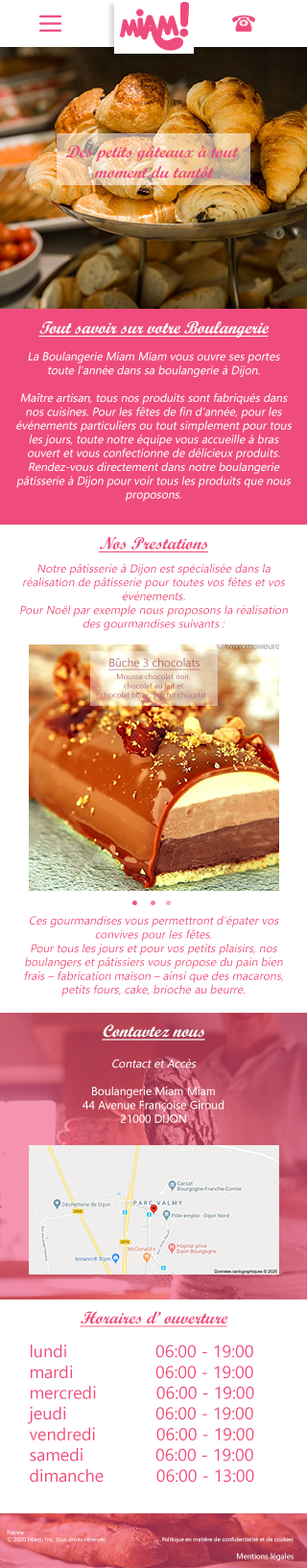
<style>
.page{position:relative;width:307px;height:1568px;background:#ffffff}
.page>*{position:absolute;margin:0}
.t1{font:17.3px "ScriptMTBold";color:#ef4c7d;font-style:italic}
.t2{font:17.3px "ScriptMTBold";color:#ffffff;font-style:italic;text-decoration:underline}
.t3{font:11.5px "SegoeUI";color:#ffffff;font-style:italic}
.t4{font:17.3px "ScriptMTBold";color:#ef4c7d;font-style:italic;text-decoration:underline}
.t5{font:11.5px "SegoeUI";color:#ef4c7d;font-style:italic}
.t6{font:11.5px "SegoeUI";color:#b46a7f;text-decoration:underline}
.t7{font:7.7px "SegoeUI";color:#b46a7f}
.t8{font:11.5px "SegoeUI";color:#ffffff}
.t9{font:17.3px "SegoeUI";color:#ef4c7d}
.t10{font:5.8px "SegoeUI";color:#ffffff}
.t11{font:5.8px "SegoeUI"}
.t12{font:7.7px "SegoeUI";color:#ffffff}
</style>
<div class="page">
<p class="t1" style="left:66px;top:145px;width:173px;height:33px;text-align:center">Des petits gâteaux à tout <br>moment du tantôt</p>
<p class="t2" style="left:38px;top:321px;width:231px;height:17px">Tout savoir sur votre Boulangerie</p>
<p class="t3" style="left:16px;top:351px;width:276px;height:151px;text-align:center">La Boulangerie Miam Miam vous ouvre ses portes toute l’année dans sa boulangerie à Dijon.<br><br>Maître artisan, tous nos produits sont fabriqués dans nos cuisines. Pour les fêtes de fin d’année, pour les événements particuliers ou tout simplement pour tous les jours, toute notre équipe vous accueille à bras ouvert et vous confectionne de délicieux produits. Rendez-vous directement dans notre boulangerie pâtisserie à Dijon pour voir tous les produits que nous proposons.</p>
<p class="t4" style="left:99px;top:537px;width:109px;height:15px">Nos Prestations</p>
<p class="t5" style="left:20px;top:564px;width:268px;height:67px;text-align:center">Notre pâtisserie à Dijon est spécialisée dans la réalisation de pâtisserie pour toutes vos fêtes et vos événements.<br>Pour Noël par exemple nous proposons la réalisation des gourmandises suivants :</p>
<p class="t6" style="left:108px;top:658px;width:92px;height:12px">Bûche 3 chocolats</p>
<p class="t7" style="left:101px;top:673px;width:105px;height:26px;text-align:center">Mousse chocolat noir, <br>chocolat au lait et <br>chocolat blanc, biscuit chocolat</p>
<p class="t5" style="left:24px;top:916px;width:259px;height:80px;text-align:center">Ces gourmandises vous permettront d’épater vos convives pour les fêtes.<br>Pour tous les jours et pour vos petits plaisirs, nos boulangers et pâtissiers vous propose du pain bien frais – fabrication maison – ainsi que des macarons, petits fours, cake, brioche au beurre.</p>
<p class="t2" style="left:102px;top:1024px;width:103px;height:17px">Contavtez nous</p>
<p class="t8" style="left:82px;top:1059px;width:141px;height:64px;text-align:center"><span class="t3">Contact et Accès<br></span><br>Boulangerie Miam Miam<br>44 Avenue Françoise Giroud<br>21000 DIJON</p>
<p class="t4" style="left:80px;top:1311px;width:148px;height:16px">Horaires d’ ouverture</p>
<p class="t9" style="left:27px;top:1345px;width:227px;height:138px;text-align:center">lundi         06:00 - 19:00<br>mardi         06:00 - 19:00<br>mercredi  06:00 - 19:00<br>jeudi         06:00 - 19:00<br>vendredi  06:00 - 19:00<br>samedi         06:00 - 19:00<br>dimanche  06:00 - 13:00</p>
<p class="t10" style="left:7px;top:1530px;width:98px;height:12px">France<br>© 2020 Miam, Inc. Tous droits réservés</p>
<p class="t11" style="left:162px;top:1536px;width:131px;height:7px">Politique en matière de confidentialité et de cookies</p>
<p class="t12" style="left:237px;top:1553px;width:56px;height:8px">Mentions légales</p>
</div>
